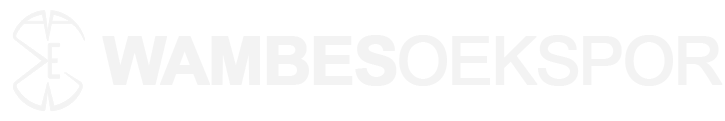
<style>
.page{position:relative;width:725px;height:121px;background:#ffffff}
.page>*{position:absolute;margin:0}
.t1{font:66.7px "ArialMT";letter-spacing:-0.04em;color:#f3f3f3;font-weight:bold}
.t2{font:66.7px "Arial-BoldMT";letter-spacing:-0.04em;color:#f3f3f3;font-weight:bold}
</style>
<div class="page">
<p class="t1" style="left:102px;top:35px;width:621px;height:51px"><span class="t2">WAMBES</span>OEKSPOR</p>
</div>
